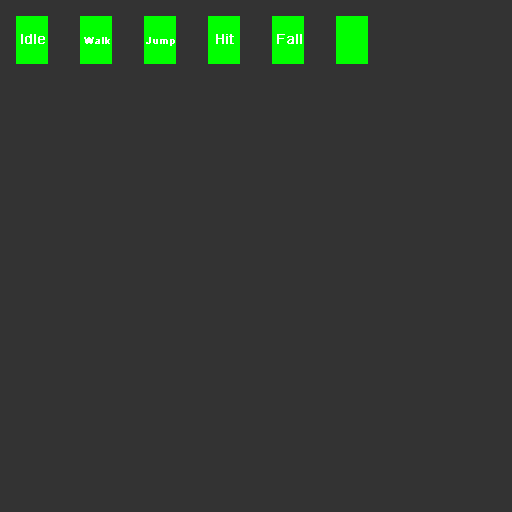
<style>
.page{position:relative;width:512px;height:512px;background:#333333}
.page>*{position:absolute;margin:0}
.t1{font:14px "ArialMT";color:#fefefe;font-weight:bold}
.t2{font:10px "ArialMT";color:#fefefe;font-weight:bold}
</style>
<div class="page">
<p class="t1" style="left:21px;top:34px;width:24px;height:10px">Idle</p>
<p class="t2" style="left:84px;top:37px;width:26px;height:7px">Walk</p>
<p class="t2" style="left:146px;top:37px;width:29px;height:9px">Jump</p>
<p class="t1" style="left:216px;top:34px;width:18px;height:10px">Hit</p>
<p class="t1" style="left:277px;top:34px;width:25px;height:10px">Fall</p>
</div>
